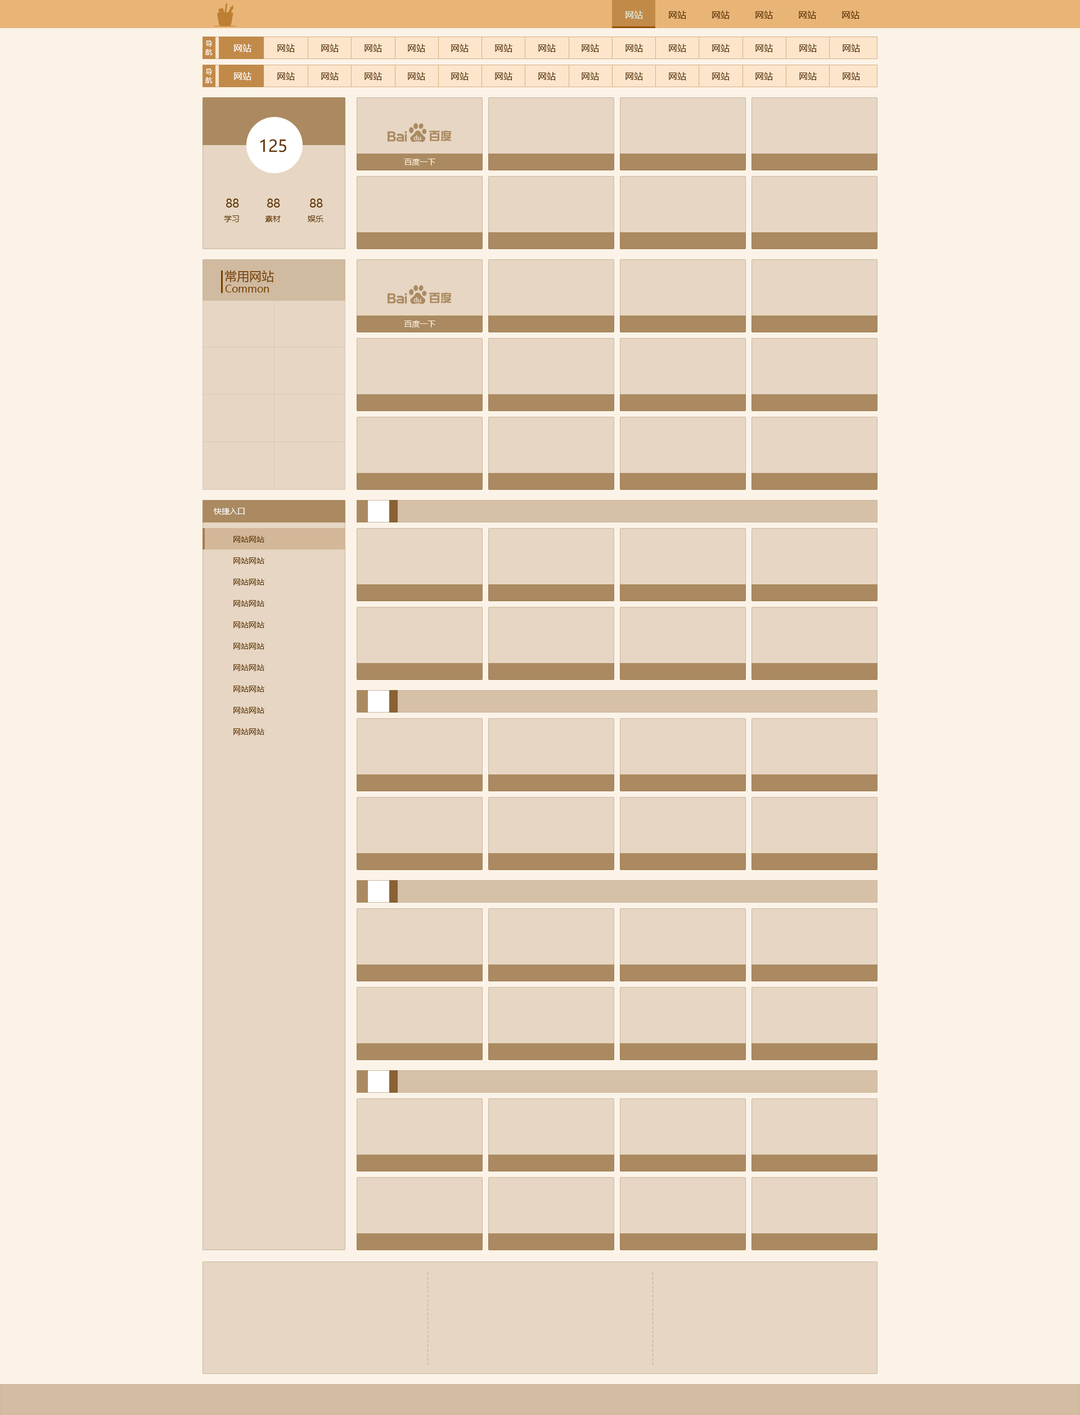
<style>
.page{position:relative;width:1080px;height:1415px;background:#fbf3e8}
.page>*{position:absolute;margin:0}
.t1{font:9px "MicrosoftYaHei";letter-spacing:0.02em;color:#def1e5}
.t2{font:9px "MicrosoftYaHei";letter-spacing:0.02em;color:#552e00}
.t3{font:6.8px/8.4px "MicrosoftYaHei";letter-spacing:0.02em;color:#ffffff}
.t4{font:9px "MicrosoftYaHei";letter-spacing:0.02em;color:#ffffff}
.t5{font:16.3px "MicrosoftYaHei";color:#613600}
.t6{font:7.9px "MicrosoftYaHei";color:#fff1e0}
.t7{font:11.8px "MicrosoftYaHei";color:#613600}
.t8{font:7.9px "MicrosoftYaHei";color:#613600}
.t9{font:12.4px "MicrosoftYaHei";color:#784100}
.t10{font:10.1px "MicrosoftYaHei";color:#784100}
.t11{font:7.9px "MicrosoftYaHei";color:#ffffff}
</style>
<div class="page">
<p class="t1" style="left:626px;top:11px;width:17px;height:8px">网站</p>
<p class="t2" style="left:669px;top:11px;width:17px;height:8px">网站</p>
<p class="t2" style="left:712px;top:11px;width:18px;height:8px">网站</p>
<p class="t2" style="left:755px;top:11px;width:18px;height:8px">网站</p>
<p class="t2" style="left:799px;top:11px;width:17px;height:8px">网站</p>
<p class="t2" style="left:842px;top:11px;width:18px;height:8px">网站</p>
<p class="t3" style="left:205px;top:40px;width:7px;height:15px;text-align:center">导<br>航</p>
<p class="t4" style="left:234px;top:44px;width:17px;height:8px">网站</p>
<p class="t2" style="left:277px;top:44px;width:18px;height:8px">网站</p>
<p class="t2" style="left:321px;top:44px;width:18px;height:8px">网站</p>
<p class="t2" style="left:364px;top:44px;width:18px;height:8px">网站</p>
<p class="t2" style="left:408px;top:44px;width:17px;height:8px">网站</p>
<p class="t2" style="left:451px;top:44px;width:18px;height:8px">网站</p>
<p class="t2" style="left:495px;top:44px;width:17px;height:8px">网站</p>
<p class="t2" style="left:538px;top:44px;width:18px;height:8px">网站</p>
<p class="t2" style="left:582px;top:44px;width:17px;height:8px">网站</p>
<p class="t2" style="left:626px;top:44px;width:17px;height:8px">网站</p>
<p class="t2" style="left:669px;top:44px;width:17px;height:8px">网站</p>
<p class="t2" style="left:712px;top:44px;width:18px;height:8px">网站</p>
<p class="t2" style="left:755px;top:44px;width:18px;height:8px">网站</p>
<p class="t2" style="left:799px;top:44px;width:18px;height:8px">网站</p>
<p class="t2" style="left:843px;top:44px;width:17px;height:8px">网站</p>
<p class="t3" style="left:205px;top:69px;width:7px;height:14px;text-align:center">导<br>航</p>
<p class="t4" style="left:234px;top:72px;width:17px;height:8px">网站</p>
<p class="t2" style="left:277px;top:72px;width:18px;height:8px">网站</p>
<p class="t2" style="left:321px;top:72px;width:18px;height:8px">网站</p>
<p class="t2" style="left:364px;top:72px;width:18px;height:8px">网站</p>
<p class="t2" style="left:408px;top:72px;width:17px;height:8px">网站</p>
<p class="t2" style="left:451px;top:72px;width:18px;height:8px">网站</p>
<p class="t2" style="left:495px;top:72px;width:17px;height:8px">网站</p>
<p class="t2" style="left:538px;top:72px;width:18px;height:8px">网站</p>
<p class="t2" style="left:582px;top:72px;width:17px;height:8px">网站</p>
<p class="t2" style="left:626px;top:72px;width:17px;height:8px">网站</p>
<p class="t2" style="left:669px;top:72px;width:17px;height:8px">网站</p>
<p class="t2" style="left:712px;top:72px;width:18px;height:8px">网站</p>
<p class="t2" style="left:755px;top:72px;width:18px;height:8px">网站</p>
<p class="t2" style="left:799px;top:72px;width:18px;height:8px">网站</p>
<p class="t2" style="left:843px;top:72px;width:17px;height:8px">网站</p>
<p class="t5" style="left:260px;top:139px;width:26px;height:13px">125</p>
<p class="t6" style="left:404px;top:159px;width:31px;height:6px">百度一下</p>
<p class="t7" style="left:226px;top:199px;width:13px;height:9px">88</p>
<p class="t7" style="left:267px;top:199px;width:13px;height:9px">88</p>
<p class="t7" style="left:310px;top:199px;width:13px;height:9px">88</p>
<p class="t8" style="left:224px;top:215px;width:15px;height:7px">学习</p>
<p class="t8" style="left:265px;top:215px;width:16px;height:7px">素材</p>
<p class="t8" style="left:308px;top:215px;width:15px;height:7px">娱乐</p>
<p class="t9" style="left:225px;top:270px;width:49px;height:12px">常用网站</p>
<p class="t10" style="left:225px;top:285px;width:44px;height:7px">Common</p>
<p class="t6" style="left:404px;top:321px;width:31px;height:6px">百度一下</p>
<p class="t11" style="left:214px;top:508px;width:31px;height:7px">快捷入口</p>
<p class="t8" style="left:233px;top:536px;width:31px;height:7px">网站网站</p>
<p class="t8" style="left:233px;top:557px;width:31px;height:7px">网站网站</p>
<p class="t8" style="left:233px;top:579px;width:31px;height:7px">网站网站</p>
<p class="t8" style="left:233px;top:600px;width:31px;height:7px">网站网站</p>
<p class="t8" style="left:233px;top:622px;width:31px;height:6px">网站网站</p>
<p class="t8" style="left:233px;top:643px;width:31px;height:7px">网站网站</p>
<p class="t8" style="left:233px;top:664px;width:31px;height:7px">网站网站</p>
<p class="t8" style="left:233px;top:686px;width:31px;height:6px">网站网站</p>
<p class="t8" style="left:233px;top:707px;width:31px;height:7px">网站网站</p>
<p class="t8" style="left:233px;top:728px;width:31px;height:7px">网站网站</p>
</div>
